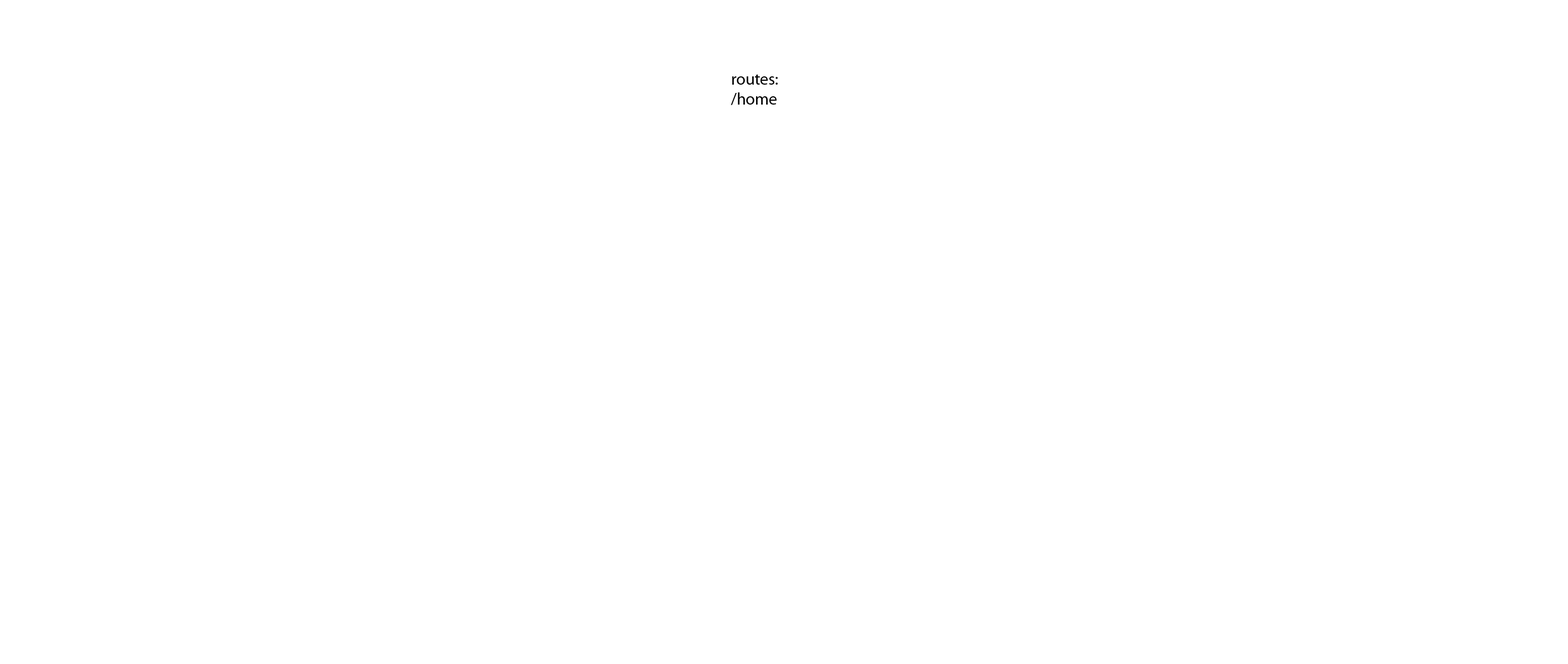
<style>
.page{position:relative;width:1568px;height:664px;background:#ffffff}
.page>*{position:absolute;margin:0}
.t1{font:16.6px "MyriadPro-Regular";color:#000000}
</style>
<div class="page">
<p class="t1" style="left:731px;top:74px;width:47px;height:31px">routes:<br>/home</p>
</div>
